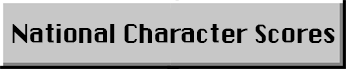
<style>
.page{position:relative;width:348px;height:70px;background:#c7c7c7}
.page>*{position:absolute;margin:0}
.t1{font:24.5px "ChicagoFLF";letter-spacing:-0.04em;color:#000000}
</style>
<div class="page">
<p class="t1" style="left:12px;top:24px;width:323px;height:19px">National Character Scores</p>
</div>
